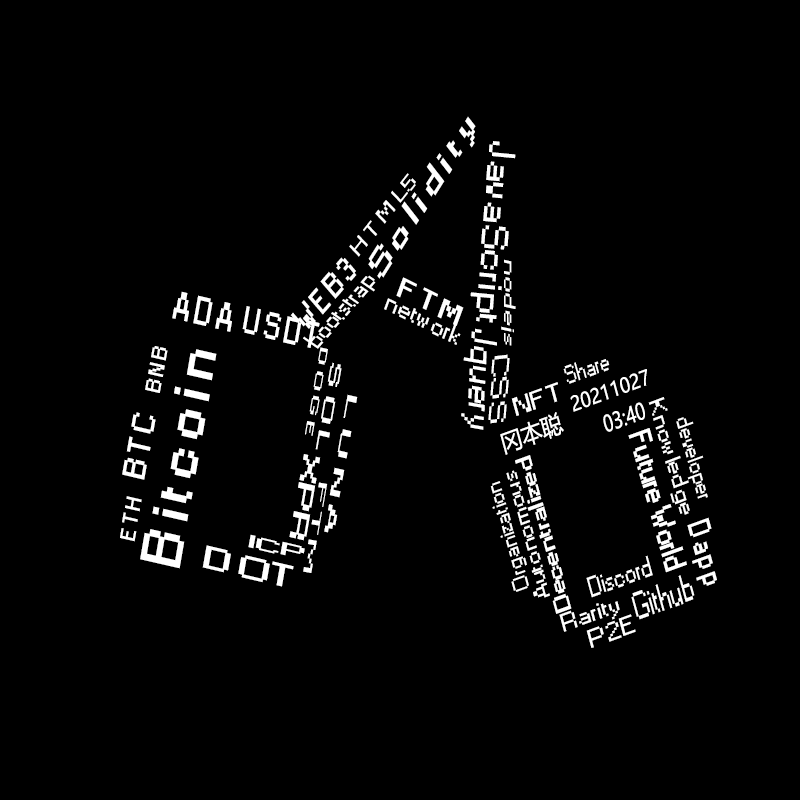
<style>
.page{position:relative;width:800px;height:800px;background:#000000}
.page>*{position:absolute;margin:0}
.t1{font:31.1px "Small Fonts";color:#ffffff;font-weight:bold;scale:1.59 1}
.t2{font:35.4px "Small Fonts";color:#ffffff;scale:1.35 1}
.t3{font:18.6px "Small Fonts";color:#ffffff;scale:1.72 1}
.t4{font:30px "Small Fonts";color:#ffffff;font-weight:bold}
.t5{font:15.7px "Small Fonts";color:#ffffff;scale:2.26 1}
.t6{font:24.5px "Small Fonts";color:#ffffff;scale:1.09 1}
.t7{font:25.5px "Small Fonts";color:#ffffff;font-weight:bold;scale:1.44 1}
.t8{font:36.4px "Small Fonts";color:#ffffff;font-weight:bold;scale:0.85 1}
.t9{font:24.7px "Small Fonts";color:#ffffff;scale:1.19 1}
.t10{font:34.5px "Small Fonts";color:#ffffff;font-weight:bold;scale:0.85 1}
.t11{font:34.5px "Small Fonts";color:#ffffff;scale:1.19 1}
.t12{font:53px "Small Fonts";color:#ffffff;font-weight:bold;scale:1.2 1}
.t13{font:19.8px "Small Fonts";color:#ffffff;font-weight:bold;scale:1.2 1}
.t14{font:10.1px "Small Fonts";color:#ffffff;font-weight:bold;scale:3.16 1}
.t15{font:14.7px "Small Fonts";color:#ffffff;font-weight:bold;scale:3.11 1}
.t16{font:23.1px "Small Fonts";color:#ffffff;scale:1.89 1}
.t17{font:24.1px "Small Fonts";color:#ffffff;scale:0.89 1}
.t18{font:20px "MicrosoftYaHei";color:#ffffff;scale:0.89 1}
.t19{font:24.1px "Small Fonts";color:#ffffff;scale:1.44 1}
.t20{font:12.9px "Small Fonts";color:#ffffff;font-weight:bold;scale:4.29 1}
.t21{font:21.4px "Small Fonts";color:#ffffff;scale:1.38 1}
.t22{font:29.6px "Small Fonts";color:#ffffff;font-weight:bold;scale:1.2 1}
.t23{font:24.1px "MicrosoftYaHei";color:#ffffff;scale:0.89 1}
.t24{font:22.2px "MicrosoftYaHei";color:#ffffff;scale:0.77 1}
.t25{font:21.4px "Small Fonts";color:#ffffff;scale:1.12 1}
.t26{font:29.3px "Small Fonts";color:#ffffff;font-weight:bold;scale:1.08 1}
.t27{font:21.7px "Small Fonts";color:#ffffff;font-weight:bold;scale:2.43 1}
.t28{font:21px "Small Fonts";color:#ffffff;font-weight:bold;scale:1.52 1}
.t29{font:21px "Small Fonts";color:#ffffff;scale:1.37 1}
.t30{font:11px "Small Fonts";color:#ffffff;scale:5.44 1}
.t31{font:29.3px "Small Fonts";color:#ffffff;font-weight:bold;scale:0.91 1}
.t32{font:16.4px "Small Fonts";color:#ffffff;font-weight:bold;scale:2.8 1}
.t33{font:29.2px "Small Fonts";color:#ffffff;font-weight:bold;scale:1.74 1}
.t34{font:26.7px "Small Fonts";color:#ffffff;scale:0.91 1}
.t35{font:36px "Small Fonts";color:#ffffff;scale:0.72 1}
.t36{font:23.6px "Small Fonts";color:#ffffff;scale:1.3 1}
.t37{font:24.1px "Small Fonts";color:#ffffff;scale:1.39 1}
</style>
<div class="page">
<p class="t1" style="left:368px;top:116px;width:108px;height:163px;rotate:-58deg">S o l i d i t y</p>
<p class="t2" style="left:470px;top:141px;width:46px;height:182px;rotate:94deg">JavaScript</p>
<p class="t3" style="left:349px;top:173px;width:67px;height:84px;rotate:-52deg">H T M L5</p>
<p class="t4" style="left:290px;top:257px;width:67px;height:72px;rotate:-49deg">W E B 3</p>
<p class="t5" style="left:501px;top:259px;width:15px;height:87px;rotate:90deg">nodejs</p>
<p class="t6" style="left:303px;top:275px;width:73px;height:74px;rotate:-49deg">bootstrap</p>
<p class="t7" style="left:396px;top:277px;width:68px;height:49px;rotate:26deg">F T M</p>
<p class="t8" style="left:172px;top:291px;width:60px;height:41px;rotate:13deg">A D A</p>
<p class="t9" style="left:384px;top:298px;width:77px;height:47px;rotate:26deg">network</p>
<p class="t10" style="left:242px;top:306px;width:78px;height:42px;rotate:13deg">U S D T</p>
<p class="t11" style="left:461px;top:328px;width:36px;height:102px;rotate:92deg">Jquery</p>
<p class="t12" style="left:140px;top:349px;width:77px;height:220px;rotate:-80deg">B i t c o i n</p>
<p class="t13" style="left:145px;top:346px;width:23px;height:47px;rotate:-80deg">B N B</p>
<p class="t14" style="left:305px;top:347px;width:23px;height:89px;rotate:100deg">D O G E</p>
<p class="t15" style="left:315px;top:362px;width:27px;height:88px;rotate:100deg">S O L</p>
<p class="t16" style="left:488px;top:354px;width:22px;height:70px;rotate:94deg">CSS</p>
<p class="t17" style="left:563px;top:359px;width:47px;height:25px;rotate:-20deg">Share</p>
<p class="t18" style="left:570px;top:369px;width:77px;height:43px;rotate:-20deg">20211027</p>
<p class="t19" style="left:511px;top:382px;width:47px;height:34px;rotate:-20deg">NFT</p>
<p class="t20" style="left:324px;top:394px;width:34px;height:139px;rotate:100deg">L U N A</p>
<p class="t21" style="left:648px;top:397px;width:42px;height:118px;rotate:74deg">Knowledge</p>
<p class="t22" style="left:122px;top:412px;width:34px;height:68px;rotate:-80deg">B T C</p>
<p class="t23" style="left:500px;top:412px;width:64px;height:43px;rotate:-20deg">冈本聪</p>
<p class="t24" style="left:603px;top:402px;width:42px;height:30px;rotate:-20deg">03:40</p>
<p class="t25" style="left:676px;top:417px;width:32px;height:82px;rotate:75deg">developer</p>
<p class="t26" style="left:628px;top:428px;width:59px;height:145px;rotate:75deg">Future World</p>
<p class="t27" style="left:289px;top:454px;width:32px;height:87px;rotate:100deg">XPR</p>
<p class="t28" style="left:515px;top:455px;width:57px;height:159px;rotate:-105deg">Decentralized</p>
<p class="t29" style="left:506px;top:470px;width:44px;height:128px;rotate:-105deg">Autonomous</p>
<p class="t30" style="left:303px;top:482px;width:25px;height:91px;rotate:100deg">FTM</p>
<p class="t25" style="left:490px;top:481px;width:39px;height:111px;rotate:-105deg">Organization</p>
<p class="t13" style="left:120px;top:496px;width:22px;height:46px;rotate:-80deg">E T H</p>
<p class="t31" style="left:687px;top:517px;width:30px;height:69px;rotate:75deg">D a p p</p>
<p class="t32" style="left:248px;top:534px;width:57px;height:22px;rotate:13deg">ICP</p>
<p class="t33" style="left:202px;top:545px;width:92px;height:42px;rotate:13deg">D OT</p>
<p class="t34" style="left:586px;top:555px;width:67px;height:43px;rotate:-20deg">Discord</p>
<p class="t35" style="left:631px;top:575px;width:64px;height:45px;rotate:-20deg">Github</p>
<p class="t36" style="left:559px;top:601px;width:61px;height:31px;rotate:-20deg">Rarity</p>
<p class="t37" style="left:586px;top:614px;width:50px;height:34px;rotate:-20deg">P2E</p>
</div>
